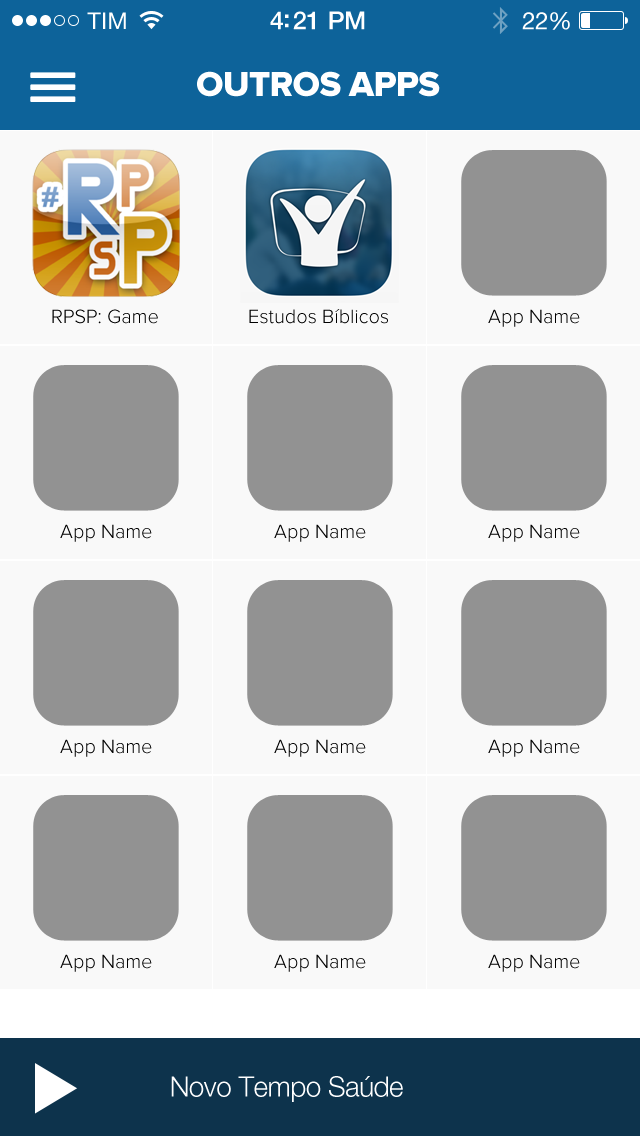
<style>
.page{position:relative;width:640px;height:1136px;background:#f9f9f9}
.page>*{position:absolute;margin:0}
.t1{font:36px "ProximaNova-Extrabld";letter-spacing:-0.02em;color:#ffffff;text-transform:uppercase}
.t2{font:20px "ProximaNova-Light";color:#000000}
.t3{font:28px "HelveticaNeueLTStd-Lt";letter-spacing:-0.02em;color:#ffffff}
</style>
<div class="page">
<p class="t1" style="left:197px;top:71px;width:243px;height:26px">outros apps</p>
<p class="t2" style="left:52px;top:309px;width:106px;height:15px">RPSP: Game</p>
<p class="t2" style="left:249px;top:309px;width:139px;height:15px">Estudos Bíblicos</p>
<p class="t2" style="left:488px;top:309px;width:92px;height:18px">App Name</p>
<p class="t2" style="left:60px;top:524px;width:92px;height:18px">App Name</p>
<p class="t2" style="left:274px;top:524px;width:92px;height:18px">App Name</p>
<p class="t2" style="left:488px;top:524px;width:92px;height:18px">App Name</p>
<p class="t2" style="left:60px;top:739px;width:92px;height:18px">App Name</p>
<p class="t2" style="left:274px;top:739px;width:92px;height:18px">App Name</p>
<p class="t2" style="left:488px;top:739px;width:92px;height:18px">App Name</p>
<p class="t2" style="left:60px;top:954px;width:92px;height:18px">App Name</p>
<p class="t2" style="left:274px;top:954px;width:92px;height:18px">App Name</p>
<p class="t2" style="left:488px;top:954px;width:92px;height:18px">App Name</p>
<p class="t3" style="left:171px;top:1076px;width:232px;height:26px">Novo Tempo Saúde</p>
</div>
